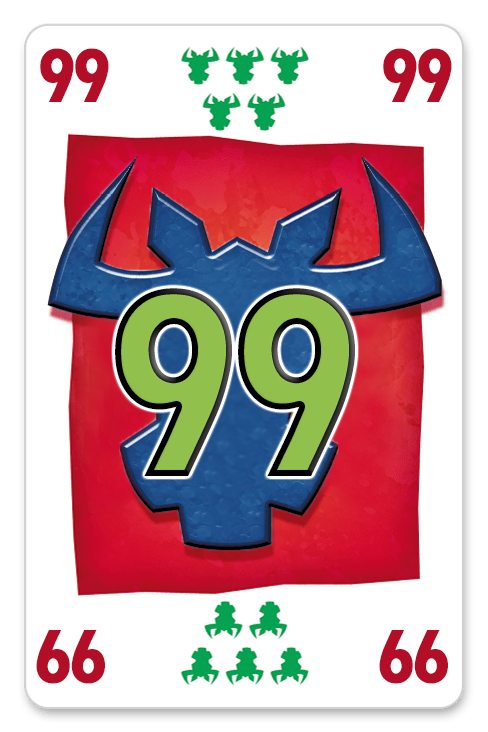
<style>
.page{position:relative;width:488px;height:732px;background:#ffffff}
.page>*{position:absolute;margin:0}
.t1{font:80px "TwCenMT-CondensedExtraBold";letter-spacing:-0.05em;color:#b30e28}
.t2{font:280px "TwCenMT-CondensedExtraBold";letter-spacing:-0.05em;color:#92c04c}
</style>
<div class="page">
<p class="t1" style="left:40px;top:48px;width:69px;height:54px">99</p>
<p class="t1" style="left:383px;top:48px;width:69px;height:54px">99</p>
<p class="t2" style="left:115px;top:288px;width:240px;height:188px">99</p>
<p class="t1" style="left:36px;top:630px;width:69px;height:54px;rotate:180deg">99</p>
<p class="t1" style="left:379px;top:630px;width:69px;height:54px;rotate:180deg">99</p>
</div>
